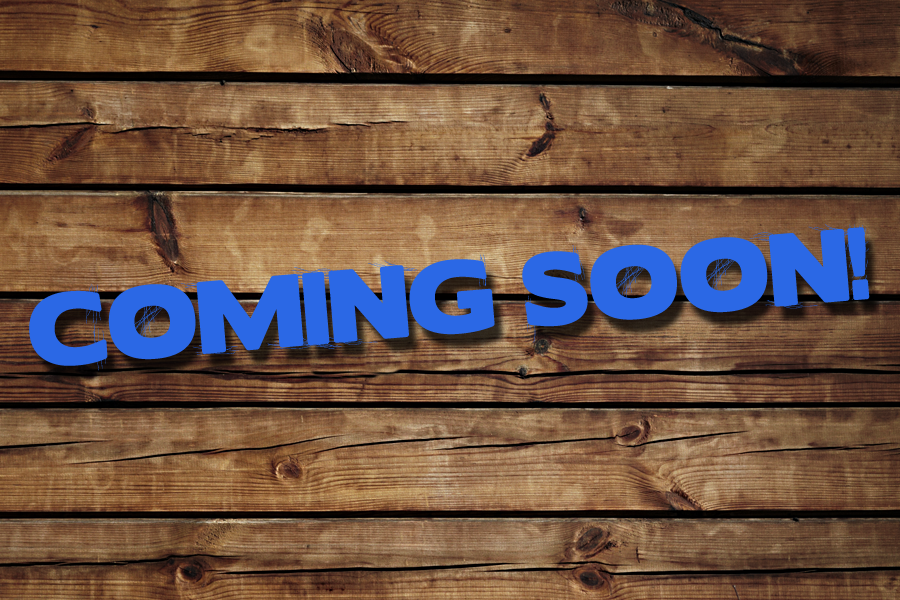
<style>
.page{position:relative;width:900px;height:600px}
.page>*{position:absolute;margin:0}
.t1{font:92px "BorisBlackBloxxDirty";color:#2b68e5}
</style>
<div class="page">
<p class="t1" style="left:29px;top:224px;width:841px;height:147px;rotate:-5deg">COMING SOON!</p>
</div>
